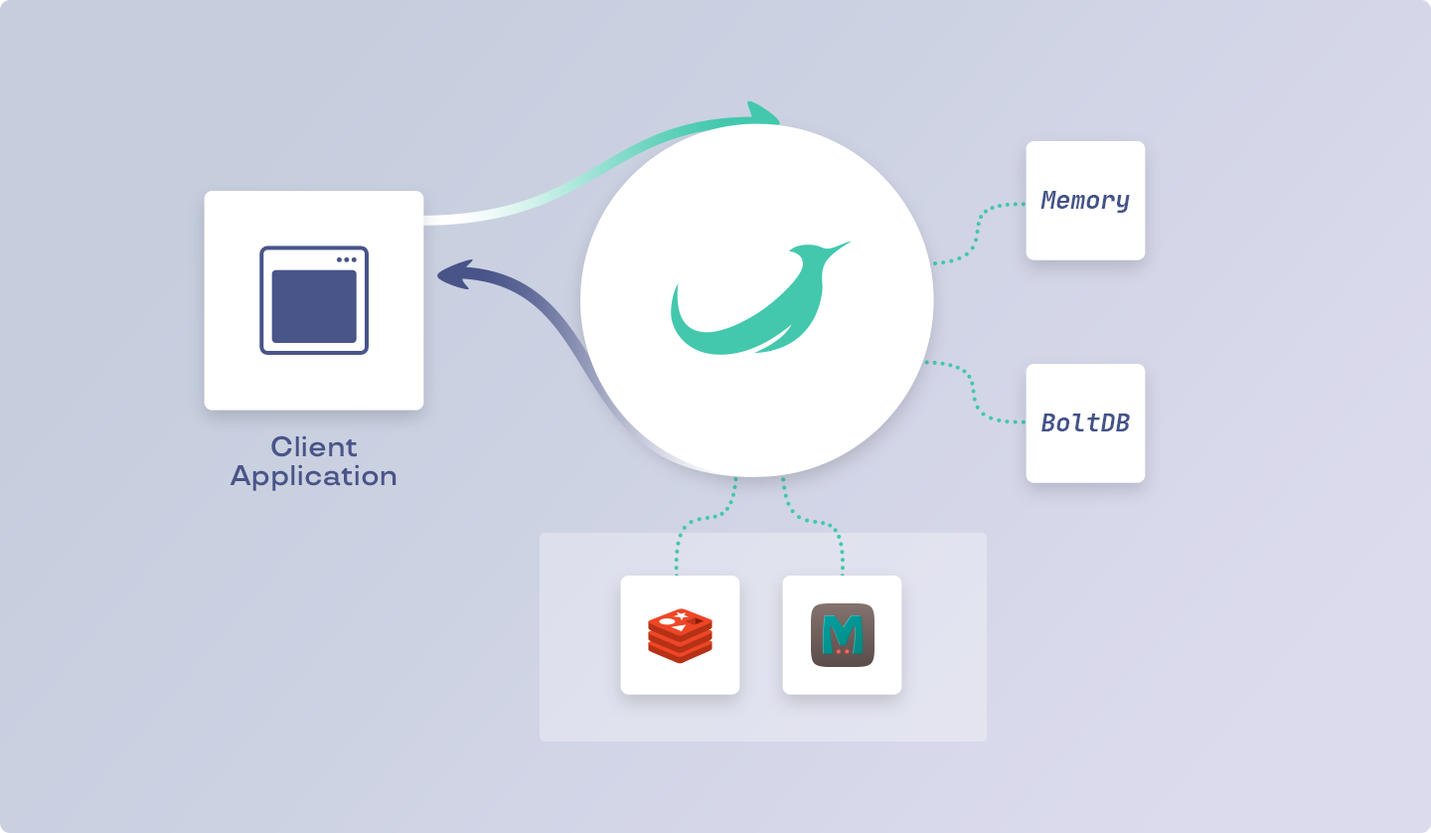
<style>
.page{position:relative;width:1431px;height:833px}
.page>*{position:absolute;margin:0}
.t1{font:24.9px "JetBrainsMono-BoldItalic";color:#435389}
.t2{font:28.2px/28.2px "TTTravels-DemiBold";color:#495489}
</style>
<div class="page">
<p class="t1" style="left:1041px;top:191px;width:89px;height:22px">Memory</p>
<p class="t1" style="left:1042px;top:414px;width:88px;height:17px">BoltDB</p>
<p class="t2" style="left:230px;top:435px;width:167px;height:56px;text-align:center">Client Application</p>
</div>
